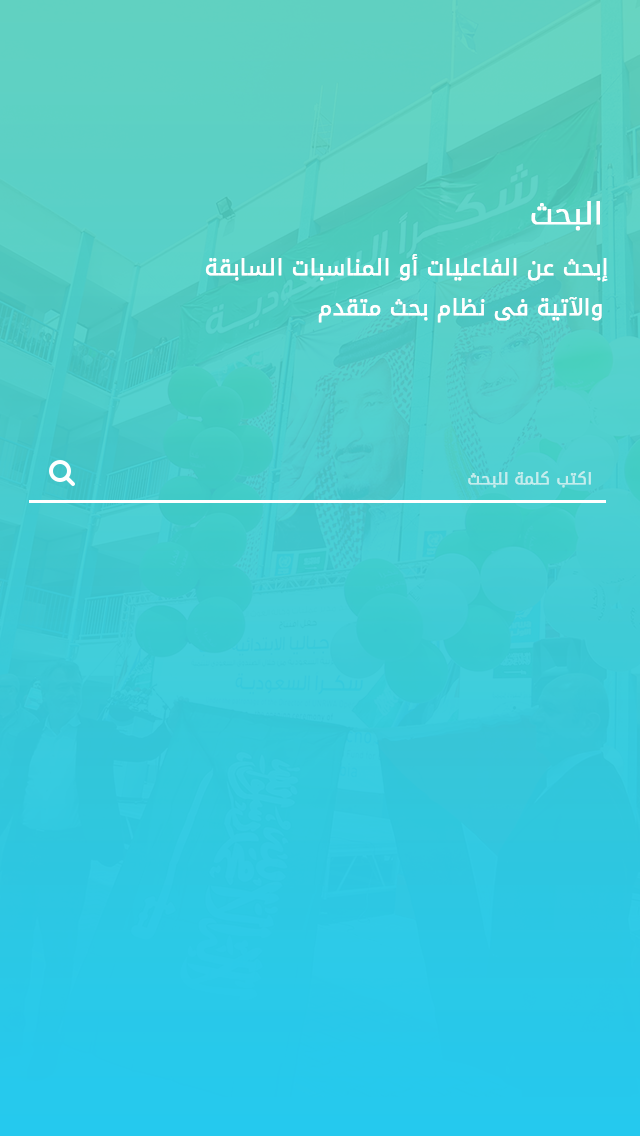
<style>
.page{position:relative;width:640px;height:1136px}
.page>*{position:absolute;margin:0}
.t1{font:30px "DroidArabicKufi";color:#ffffff;font-weight:bold}
.t2{font:22px/39.6px "DroidArabicKufi";color:#ffffff;font-weight:bold}
.t3{font:16px "DroidArabicKufi";color:#c4eded;font-weight:bold}
</style>
<div class="page">
<p class="t1" style="left:531px;top:201px;width:69px;height:30px">البحث</p>
<p class="t2" style="left:205px;top:254px;width:403px;height:69px">إبحث عن الفاعليات أو المناسبات السابقة والآتية فى نظام بحث متقدم</p>
<p class="t3" style="left:468px;top:471px;width:123px;height:17px">اكتب كلمة للبحث</p>
</div>
